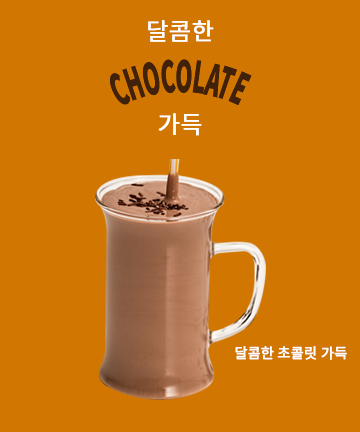
<style>
.page{position:relative;width:360px;height:432px;background:#d17600}
.page>*{position:absolute;margin:0}
.t1{font:24px "NotoSansKR-Regular";color:#ffffff;font-weight:bold}
.t2{font:14px "NotoSansKR-Regular";color:#ffffff;font-weight:bold}
</style>
<div class="page">
<p class="t1" style="left:148px;top:20px;width:66px;height:22px">달콤한</p>
<p class="t1" style="left:158px;top:113px;width:44px;height:23px">가득</p>
<p class="t2" style="left:235px;top:346px;width:112px;height:14px">달콤한 초콜릿 가득</p>
</div>
